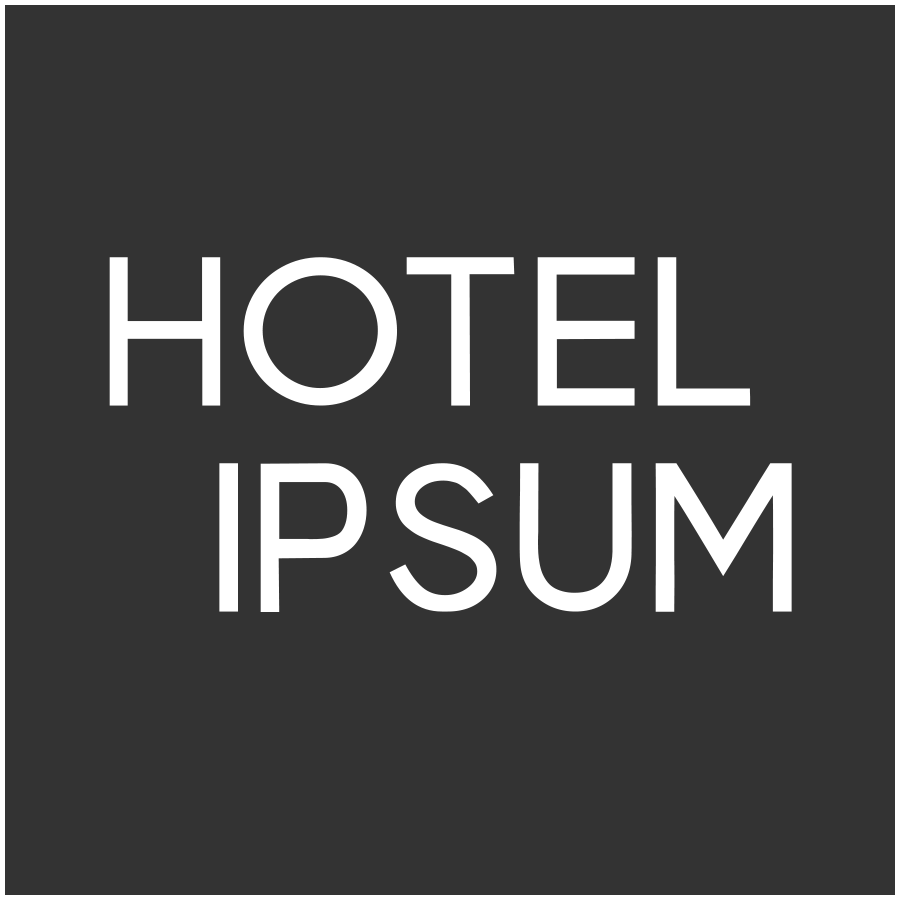
<style>
.page{position:relative;width:900px;height:900px;background:#333333}
.page>*{position:absolute;margin:0}
.t1{font:220px "VisiaPro-Bold";color:#ffffff}
</style>
<div class="page">
<p class="t1" style="left:109px;top:257px;width:642px;height:149px">HOTEL</p>
<p class="t1" style="left:219px;top:463px;width:573px;height:149px">IPSUM</p>
</div>
